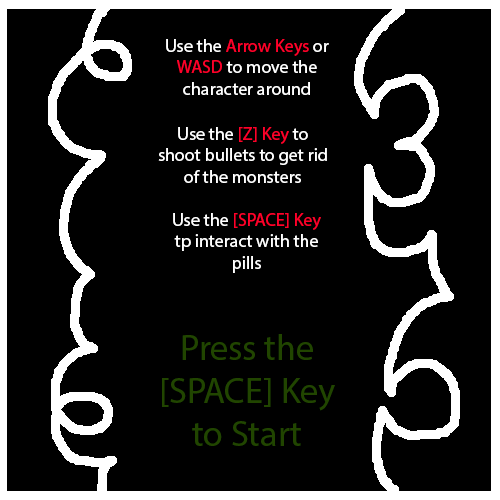
<style>
.page{position:relative;width:500px;height:500px;background:#000000}
.page>*{position:absolute;margin:0}
.t1{font:18px "MyriadPro-Regular";color:#ffffff}
.t2{font:18px "MyriadPro-Regular";color:#ff002a}
.t3{font:36px "MyriadPro-Regular";color:#214500}
</style>
<div class="page">
<p class="t1" style="left:166px;top:39px;width:163px;height:56px;text-align:center">Use the <span class="t2">Arrow Keys</span> or <span class="t2">WASD</span> to move the character around</p>
<p class="t1" style="left:158px;top:127px;width:169px;height:56px;text-align:center">Use the <span class="t2">[Z] Key</span> to shoot bullets to get rid of the monsters</p>
<p class="t1" style="left:173px;top:213px;width:148px;height:60px;text-align:center">Use the <span class="t2">[SPACE] Key </span>tp interact with the pills</p>
<p class="t3" style="left:162px;top:334px;width:173px;height:112px;text-align:center">Press the [SPACE] Key to Start</p>
</div>
